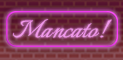
<style>
.page{position:relative;width:123px;height:60px}
.page>*{position:absolute;margin:0}
.t1{font:30px "Italianno-Regular";color:#f09aea;scale:1.15 1}
</style>
<div class="page">
<p class="t1" style="left:13px;top:19px;width:99px;height:19px">Mancato!</p>
<p class="t1" style="left:13px;top:19px;width:99px;height:19px">Mancato!</p>
</div>
